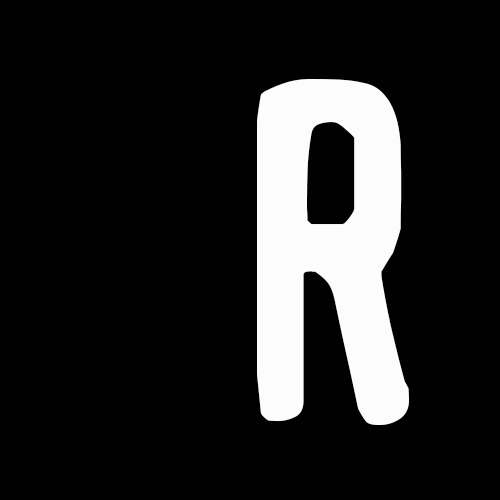
<style>
.page{position:relative;width:500px;height:500px;background:#010101}
.page>*{position:absolute;margin:0}
.t1{font:441.9px "MythBusters";color:#fcfcfc}
</style>
<div class="page">
<p class="t1" style="left:257px;top:79px;width:152px;height:346px">R</p>
</div>
